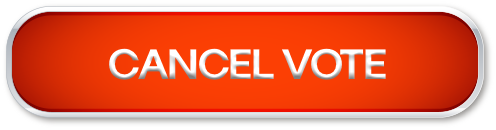
<style>
.page{position:relative;width:496px;height:130px}
.page>*{position:absolute;margin:0}
.t1{font:43.2px "Sk-Modernist-Bold";letter-spacing:-0.024em}
</style>
<div class="page">
<p class="t1" style="left:109px;top:48px;width:277px;height:32px">CANCEL VOTE</p>
</div>
